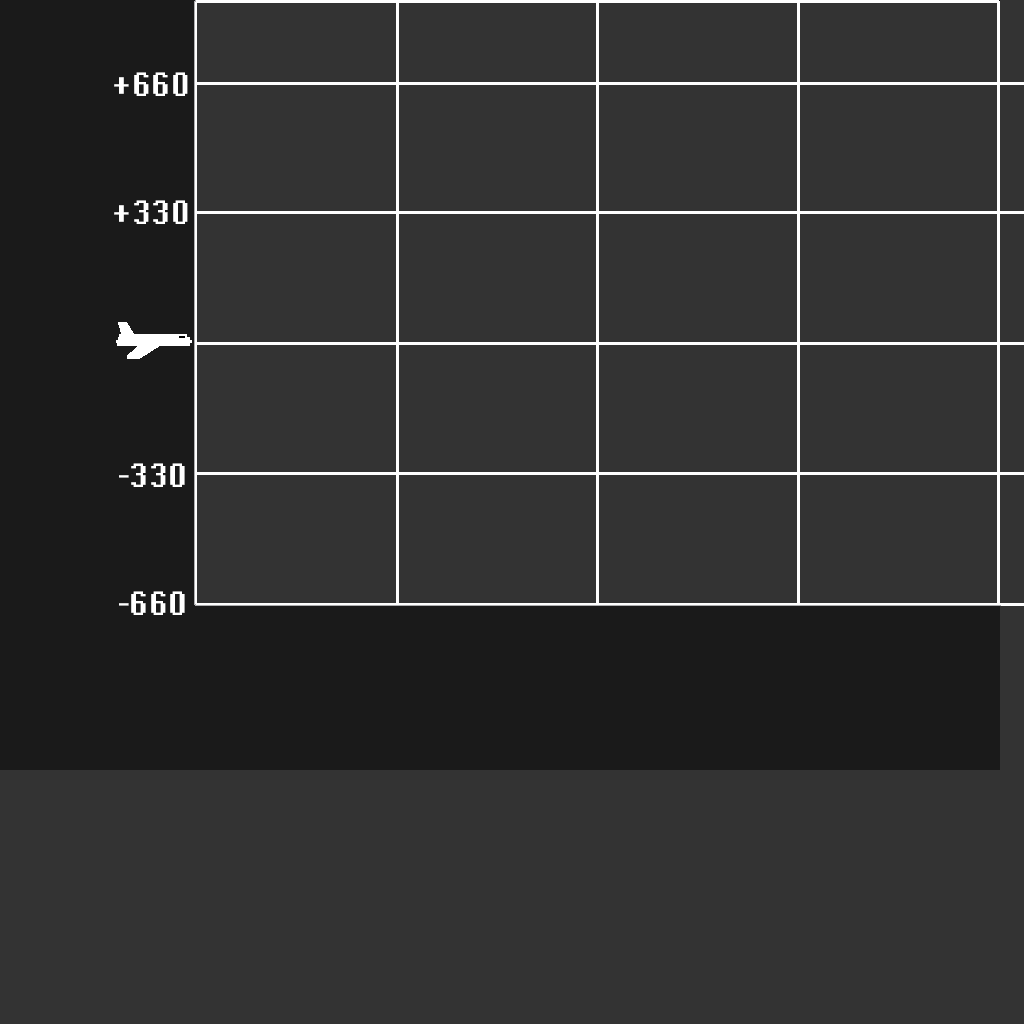
<style>
.page{position:relative;width:1024px;height:1024px;background:#333333}
.page>*{position:absolute;margin:0}
.t1{font:30px "System";letter-spacing:0.025em;color:#ffffff}
</style>
<div class="page">
<p class="t1" style="left:114px;top:72px;width:74px;height:24px">+660</p>
<p class="t1" style="left:114px;top:200px;width:74px;height:24px">+330</p>
<p class="t1" style="left:119px;top:463px;width:66px;height:24px">-330</p>
<p class="t1" style="left:119px;top:591px;width:66px;height:24px">-660</p>
</div>
